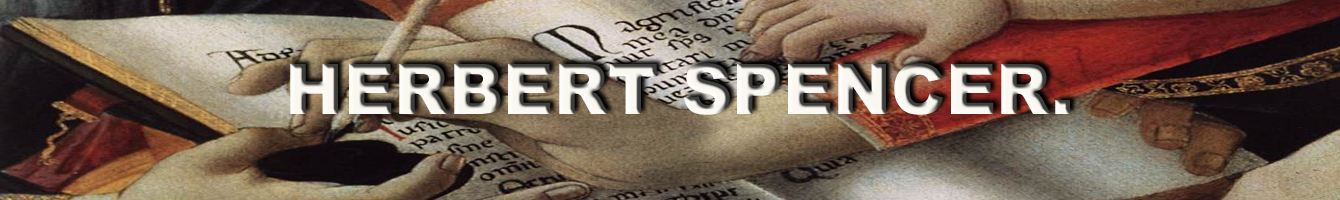
<style>
.page{position:relative;width:1340px;height:200px}
.page>*{position:absolute;margin:0}
.t1{font:70px "Arial-Black";color:#f9f7f0}
</style>
<div class="page">
<p class="t1" style="left:290px;top:63px;width:780px;height:52px">HERBERT SPENCER.</p>
</div>
